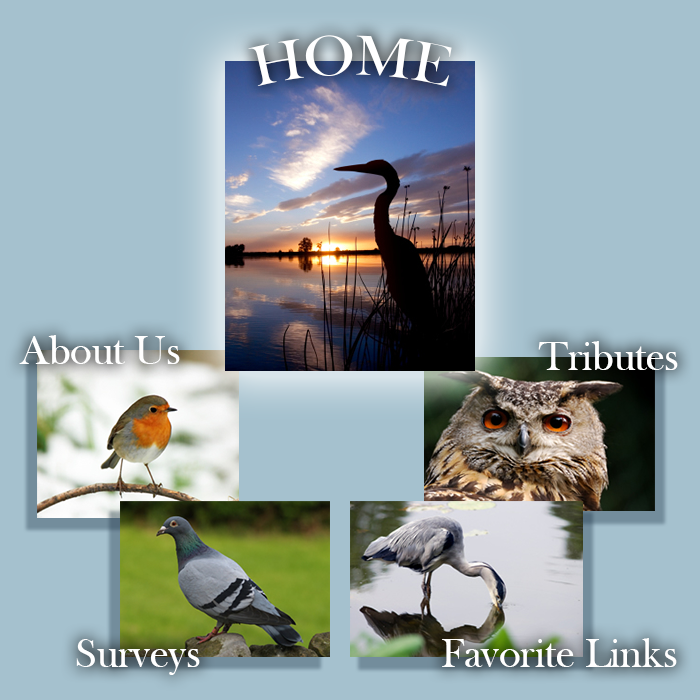
<style>
.page{position:relative;width:700px;height:700px;background:#a5c1ce}
.page>*{position:absolute;margin:0}
.t1{font:58.3px "BaskOldFace";color:#ffffff}
.t2{font:41.7px "BaskOldFace";color:#ffffff}
</style>
<div class="page">
<p class="t1" style="left:248px;top:35px;width:204px;height:52px">HOME</p>
<p class="t2" style="left:19px;top:335px;width:161px;height:29px">About Us</p>
<p class="t2" style="left:538px;top:341px;width:140px;height:29px">Tributes</p>
<p class="t2" style="left:76px;top:639px;width:124px;height:36px">Surveys</p>
<p class="t2" style="left:442px;top:638px;width:235px;height:29px">Favorite Links</p>
</div>
